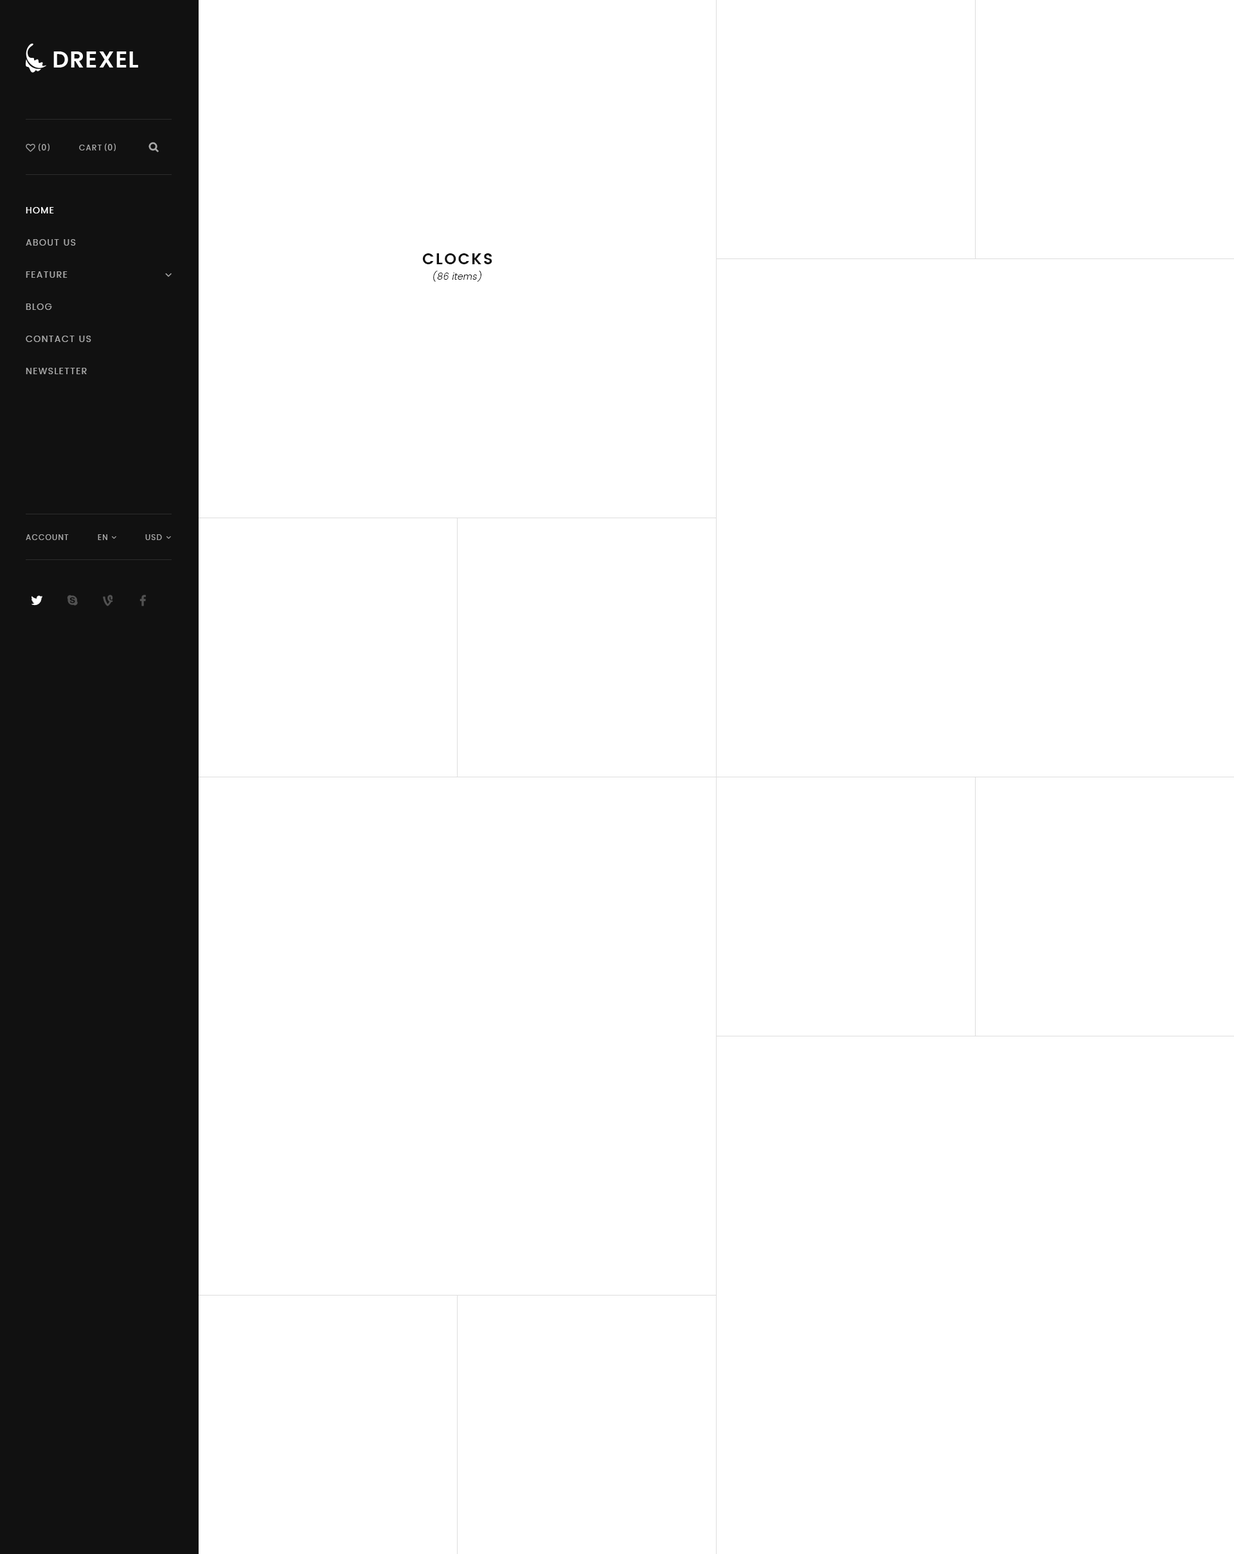
<style>
.page{position:relative;width:1234px;height:1554px;background:#ffffff}
.page>*{position:absolute;margin:0}
.t1{font:9px "MyriadPro-Regular";letter-spacing:0.1em;color:#aaaaaa;text-transform:uppercase}
.t2{font:7.7px "Poppins-Regular";letter-spacing:0.1em;color:#aaaaaa;text-transform:uppercase}
.t3{font:9px/32.1px "Poppins-Regular";letter-spacing:0.1em;color:#aaaaaa;text-transform:uppercase}
.t4{font:9px/32.1px "Poppins-Regular";letter-spacing:0.1em;color:#ffffff;text-transform:uppercase}
.t5{font:15.4px "Poppins-SemiBold";letter-spacing:0.1em;color:#111111;text-transform:uppercase}
.t6{font:9px "Poppins-Light";letter-spacing:0.025em;color:#111111;font-style:italic}
.t7{font:7.7px "Poppins-Regular";letter-spacing:0.1em;color:#aaaaaa}
</style>
<div class="page">
<p class="t1" style="left:39px;top:143px;width:11px;height:8px">(0)</p>
<p class="t2" style="left:79px;top:145px;width:23px;height:5px">Cart</p>
<p class="t1" style="left:105px;top:143px;width:11px;height:8px">(0)</p>
<p class="t3" style="left:26px;top:207px;width:65px;height:167px"><span class="t4">Home<br></span>about us<br>Feature<br>Blog<br>contact us<br>newsletter</p>
<p class="t5" style="left:422px;top:253px;width:70px;height:11px">Clocks</p>
<p class="t6" style="left:433px;top:271px;width:49px;height:11px">(86 items)</p>
<p class="t2" style="left:26px;top:534px;width:43px;height:6px">Account</p>
<p class="t7" style="left:98px;top:534px;width:9px;height:6px">EN</p>
<p class="t7" style="left:145px;top:534px;width:17px;height:6px">USD</p>
</div>
